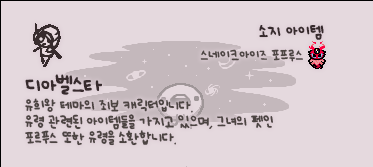
<style>
.page{position:relative;width:373px;height:167px;background:#e5d9de}
.page>*{position:absolute;margin:0}
.t1{font:12px "UhBeeSe_hyunBold";color:#372b2d}
.t2{font:12px "UhBeeSe_hyunBold";letter-spacing:-0.1em;color:#372b2d}
.t3{font:10px "UhBeeSe_hyunBold";color:#4c4442}
.t4{font:11px/16px "UhBeeSe_hyunBold";letter-spacing:-0.025em;color:#4c4442}
.t5{font:16px/23px "UhBeeSe_hyunBold";color:#372b2d}
.t6{font:16px/23px "UhBeeSe_hyunBold";letter-spacing:-0.125em;color:#372b2d}
.t7{font:16px/23px "UhBeeSe_hyunBold";letter-spacing:-0.05em;color:#372b2d}
.t8{font:16px/23px "UhBeeSe_hyunBold";letter-spacing:-0.1em;color:#372b2d}
.t9{font:11px/16px "UhBeeSe_hyunBold";letter-spacing:-0.15em;color:#4c4442}
</style>
<div class="page">
<p class="t1" style="left:259px;top:25px;width:65px;height:15px"><span class="t2">소</span>지 아이템</p>
<p class="t3" style="left:200px;top:49px;width:103px;height:13px">스네이크아이즈 포프루스</p>
<p class="t4" style="left:25px;top:74px;width:248px;height:72px"><span class="t5">디</span><span class="t6">아</span><span class="t7">벨</span><span class="t8">스</span><span class="t5">타<br></span>유희왕 테마의 죄보 캐릭터입니다.<br>유령 관련된 아이템들을 가지고 있으며, 그녀의 펫인<br>포르푸스 또한 유령을 <span class="t9">소</span>환합니다.</p>
</div>
